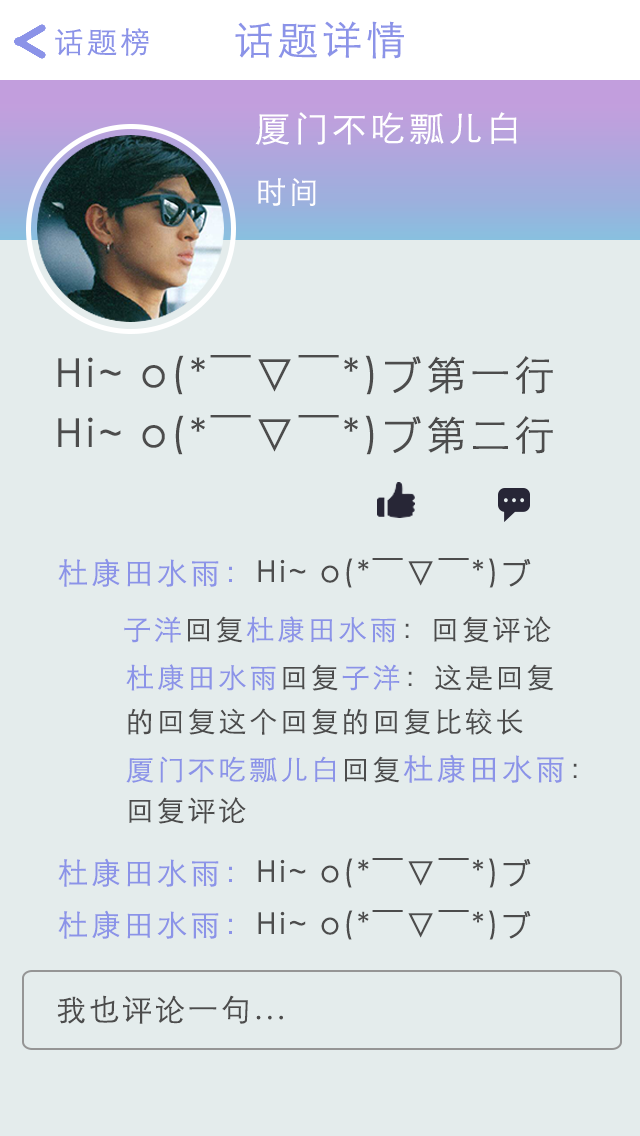
<style>
.page{position:relative;width:640px;height:1136px;background:#e4ecec}
.page>*{position:absolute;margin:0}
.t1{font:30px "STXihei";letter-spacing:0.1em;color:#8b93e8}
.t2{font:40px "STXihei";letter-spacing:0.1em;color:#8b93e8}
.t3{font:35px "STXihei";letter-spacing:0.1em;color:#ffffff}
.t4{font:30px "STXihei";letter-spacing:0.1em;color:#ffffff}
.t5{font:40px "STXihei";letter-spacing:0.1em;color:#4c4c4c}
.t6{font:30px "STXihei";letter-spacing:0.1em;color:#4c4c4c}
.t7{font:28px "STXihei";letter-spacing:0.1em;color:#8b93e8}
.t8{font:28px "STXihei";letter-spacing:0.1em;color:#4c4c4c}
.t9{font:28px/1.4px "STXihei";letter-spacing:0.1em;color:#4c4c4c}
.t10{font:28px/1.4px "STXihei";letter-spacing:0.1em;color:#8b93e8}
.t11{font:30px/1.4px "STXihei";letter-spacing:0.1em;color:#8b93e8}
</style>
<div class="page">
<p class="t1" style="left:55px;top:28px;width:94px;height:28px">话题榜</p>
<p class="t2" style="left:235px;top:21px;width:169px;height:38px">话题详情</p>
<p class="t3" style="left:255px;top:112px;width:262px;height:33px">厦门不吃瓢儿白</p>
<p class="t4" style="left:258px;top:178px;width:58px;height:28px">时间</p>
<p class="t5" style="left:58px;top:355px;width:495px;height:40px">Hi~ o(*￣▽￣*)ブ第一行</p>
<p class="t5" style="left:58px;top:415px;width:495px;height:40px">Hi~ o(*￣▽￣*)ブ第二行</p>
<p class="t6" style="left:58px;top:558px;width:473px;height:30px"><span class="t1">杜康田水雨：</span>Hi~ o(*￣▽￣*)ブ</p>
<p class="t7" style="left:124px;top:616px;width:427px;height:27px">子洋<span class="t8">回复</span>杜康田水雨<span class="t8">：回复评论</span></p>
<p class="t7" style="left:126px;top:664px;width:428px;height:27px">杜康田水雨<span class="t8">回复</span>子洋<span class="t8">：这是回复</span></p>
<p class="t8" style="left:128px;top:708px;width:395px;height:27px">的回复这个回复的回复比较长</p>
<p class="t9" style="left:126px;top:754px;width:451px;height:70px"><span class="t10">厦门不吃瓢儿白</span>回复<span class="t11">杜康田水雨</span>：<br><br><br><br><br><br><br><br><br><br><br><br><br><br><br><br><br><br><br><br><br><br><br><br><br><br><br><br><br><br><br>回复评论</p>
<p class="t6" style="left:58px;top:858px;width:473px;height:30px"><span class="t1">杜康田水雨：</span>Hi~ o(*￣▽￣*)ブ</p>
<p class="t6" style="left:58px;top:910px;width:473px;height:30px"><span class="t1">杜康田水雨：</span>Hi~ o(*￣▽￣*)ブ</p>
<p class="t6" style="left:57px;top:995px;width:226px;height:29px">我也评论一句...</p>
</div>
